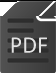
<style>
.page{position:relative;width:56px;height:73px}
.page>*{position:absolute;margin:0}
.t1{font:24px "Calibri";color:#e3e3e3}
</style>
<div class="page">
<p class="t1" style="left:11px;top:36px;width:36px;height:16px">PDF</p>
</div>
